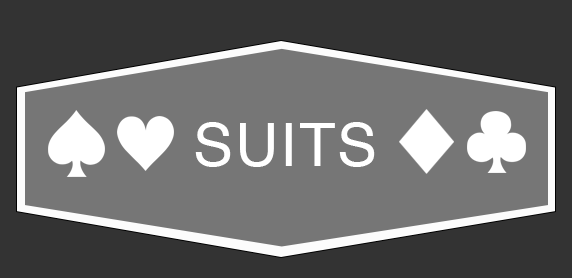
<style>
.page{position:relative;width:572px;height:278px;background:#767676}
.page>*{position:absolute;margin:0}
.t1{font:60px "Helvetica";letter-spacing:0.03em;color:#ffffff;text-transform:uppercase}
</style>
<div class="page">
<p class="t1" style="left:195px;top:122px;width:180px;height:45px">Suits</p>
</div>
